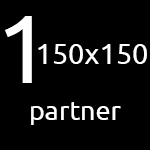
<style>
.page{position:relative;width:150px;height:150px;background:#000000}
.page>*{position:absolute;margin:0}
.t1{font:97px "Ubuntu";color:#ffffff}
.t2{font:29px "Ubuntu";color:#ffffff}
.t3{font:27px "Ubuntu";color:#ffffff}
</style>
<div class="page">
<p class="t1" style="left:5px;top:16px;width:27px;height:67px">1</p>
<p class="t2" style="left:38px;top:44px;width:109px;height:20px">150x150</p>
<p class="t3" style="left:31px;top:102px;width:90px;height:23px">partner</p>
</div>
